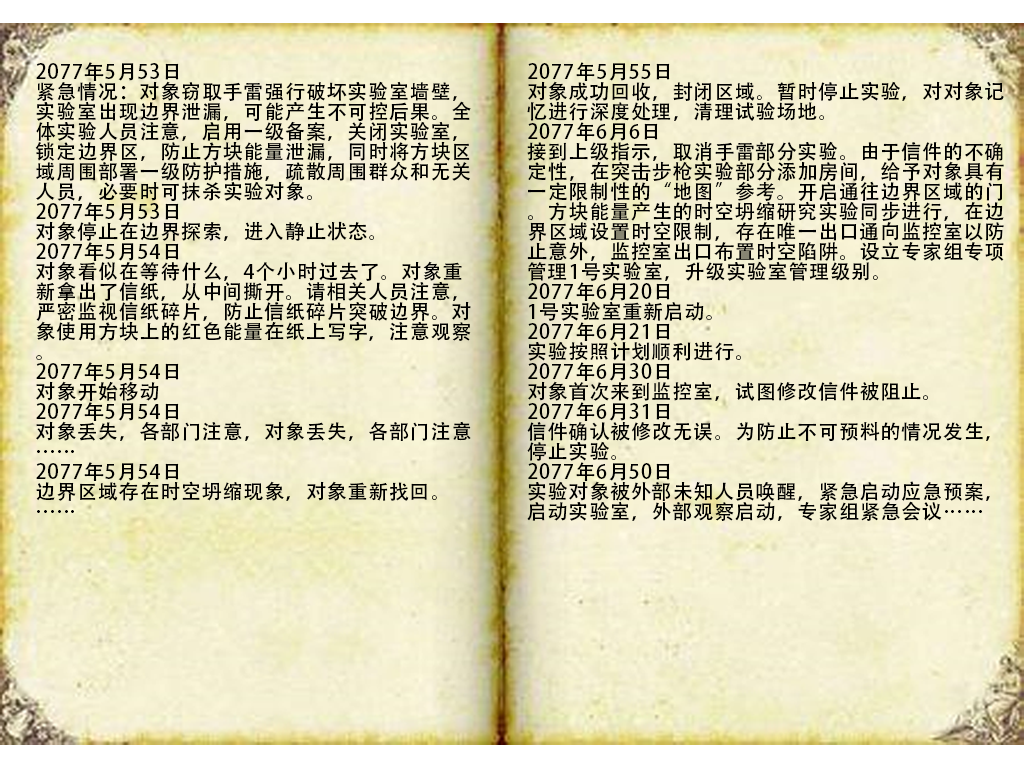
<style>
.page{position:relative;width:1024px;height:768px}
.page>*{position:absolute;margin:0}
.t1{font:20px/20px "AdobeHeitiStd-Regular";letter-spacing:0.04em;color:#000000}
</style>
<div class="page">
<p class="t1" style="left:35px;top:62px;width:436px;height:451px">2077年5月53日<br>紧急情况：对象窃取手雷强行破坏实验室墙壁，实验室出现边界泄漏，可能产生不可控后果。全体实验人员注意，启用一级备案，关闭实验室，锁定边界区，防止方块能量泄漏，同时将方块区域周围部署一级防护措施，疏散周围群众和无关人员，必要时可抹杀实验对象。<br>2077年5月53日<br>对象停止在边界探索，进入静止状态。<br>2077年5月54日<br>对象看似在等待什么，4个小时过去了。对象重新拿出了信纸，从中间撕开。请相关人员注意，严密监视信纸碎片，防止信纸碎片突破边界。对象使用方块上的红色能量在纸上写字，注意观察。<br>2077年5月54日<br>对象开始移动<br>2077年5月54日<br>对象丢失，各部门注意，对象丢失，各部门注意……<br>2077年5月54日<br>边界区域存在时空坍缩现象，对象重新找回。<br>……</p>
<p class="t1" style="left:527px;top:62px;width:477px;height:459px">2077年5月55日<br>对象成功回收，封闭区域。暂时停止实验，对对象记忆进行深度处理，清理试验场地。<br>2077年6月6日<br>接到上级指示，取消手雷部分实验。由于信件的不确定性，在突击步枪实验部分添加房间，给予对象具有一定限制性的“地图”参考。开启通往边界区域的门。方块能量产生的时空坍缩研究实验同步进行，在边界区域设置时空限制，存在唯一出口通向监控室以防止意外，监控室出口布置时空陷阱。设立专家组专项管理1号实验室，升级实验室管理级别。<br>2077年6月20日<br>1号实验室重新启动。<br>2077年6月21日<br>实验按照计划顺利进行。<br>2077年6月30日<br>对象首次来到监控室，试图修改信件被阻止。<br>2077年6月31日<br>信件确认被修改无误。为防止不可预料的情况发生，停止实验。<br>2077年6月50日<br>实验对象被外部未知人员唤醒，紧急启动应急预案，启动实验室，外部观察启动，专家组紧急会议……</p>
</div>
